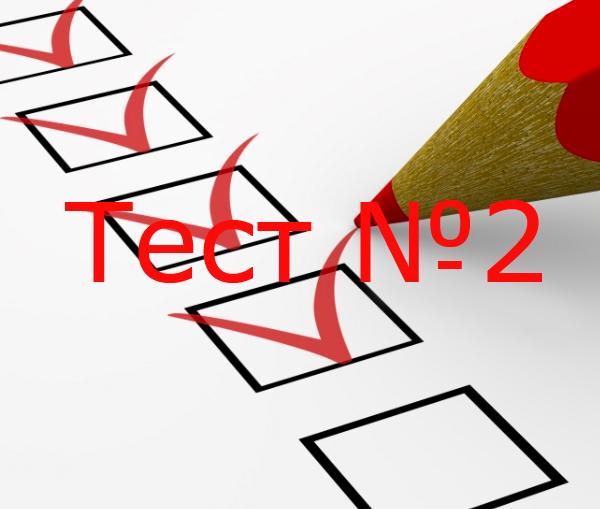
<style>
.page{position:relative;width:600px;height:509px}
.page>*{position:absolute;margin:0}
.t1{font:110px "Verdana";color:#ff0909}
</style>
<div class="page">
<p class="t1" style="left:65px;top:200px;width:477px;height:83px">Тест №2</p>
</div>
